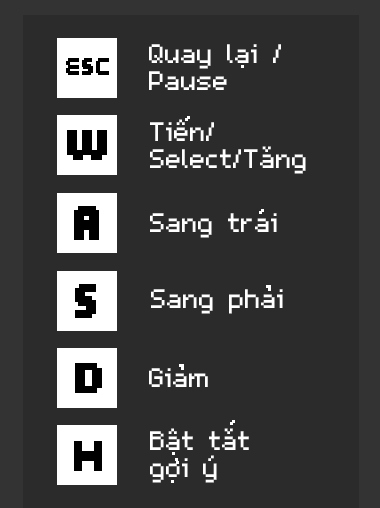
<style>
.page{position:relative;width:380px;height:508px;background:#2b2b2b}
.page>*{position:absolute;margin:0}
.t1{font:43px/27px "m5x7";color:#ffffff}
.t2{font:43px "m5x7";color:#ffffff}
</style>
<div class="page">
<p class="t1" style="left:149px;top:44px;width:132px;height:46px">Quay lai /<br>Pause</p>
<p class="t1" style="left:150px;top:119px;width:156px;height:55px">Tiên/<br>Select/Tăng</p>
<p class="t2" style="left:150px;top:213px;width:127px;height:25px">Sang trai</p>
<p class="t2" style="left:151px;top:289px;width:132px;height:25px">Sang phai</p>
<p class="t2" style="left:149px;top:368px;width:59px;height:19px">Giam</p>
<p class="t1" style="left:150px;top:428px;width:99px;height:55px">Bât tăt<br>goi ý</p>
</div>
